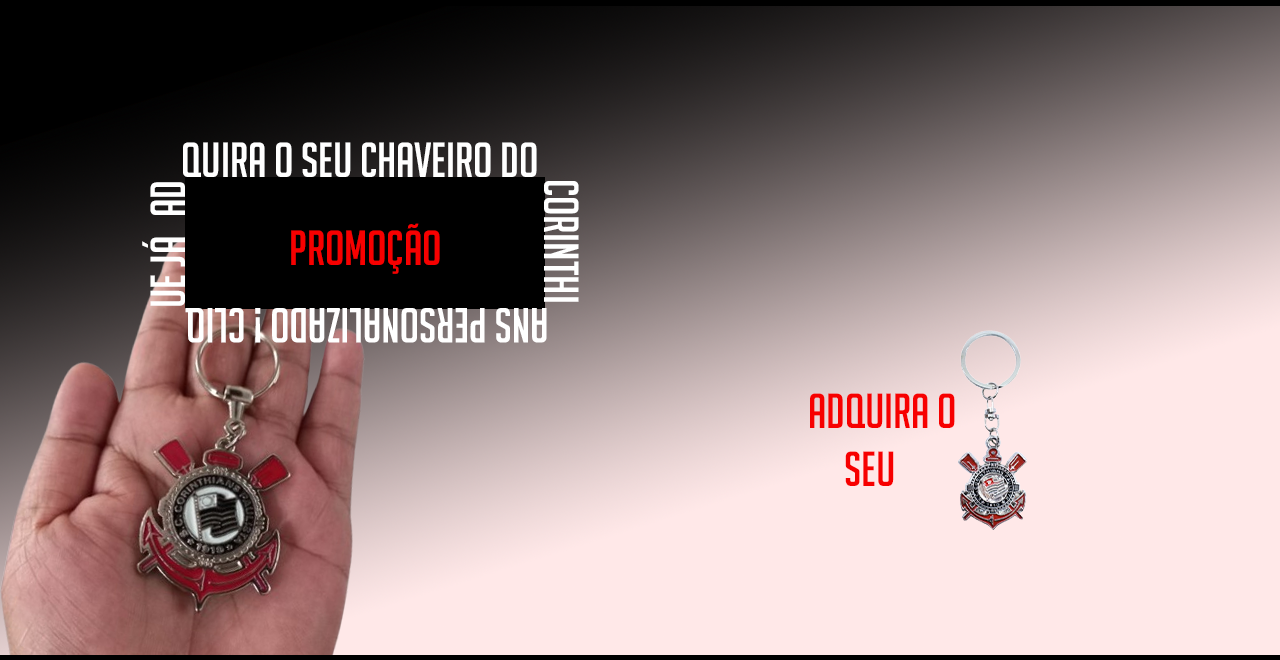
<style>
.page{position:relative;width:1280px;height:660px}
.page>*{position:absolute;margin:0}
.t1{font:48px "BigNoodleTitling";color:#ffffff}
.t2{font:48px "BigNoodleTitling";color:#f70000}
</style>
<div class="page">
<p class="t1" style="left:142px;top:142px;width:437px;height:201px">Adquira o seu chaveiro do corinthians personalizado ! clique já</p>
<p class="t2" style="left:291px;top:223px;width:149px;height:51px">PROMOÇÃO</p>
<p class="t2" style="left:810px;top:393px;width:145px;height:93px">Adquira o    seu <br><br>o</p>
</div>
